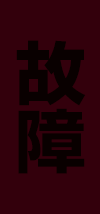
<style>
.page{position:relative;width:100px;height:214px;background:#33000c}
.page>*{position:absolute;margin:0}
.t1{font:16.3px "ShinGoPro-Bold";color:#090000;scale:1.04 1}
</style>
<div class="page">
<p class="t1" style="left:16px;top:40px;width:70px;height:134px;text-align:center">故障</p>
</div>
